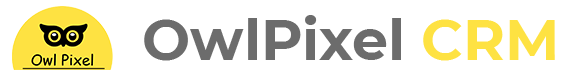
<style>
.page{position:relative;width:586px;height:76px;background:#ffffff}
.page>*{position:absolute;margin:0}
.t1{font:57px "Montserrat-Bold";color:#6c6c6c}
.t2{font:57px "Montserrat-Bold";color:#fee242}
</style>
<div class="page">
<p class="t1" style="left:144px;top:15px;width:411px;height:46px">OwlPixel <span class="t2">CRM</span></p>
</div>
